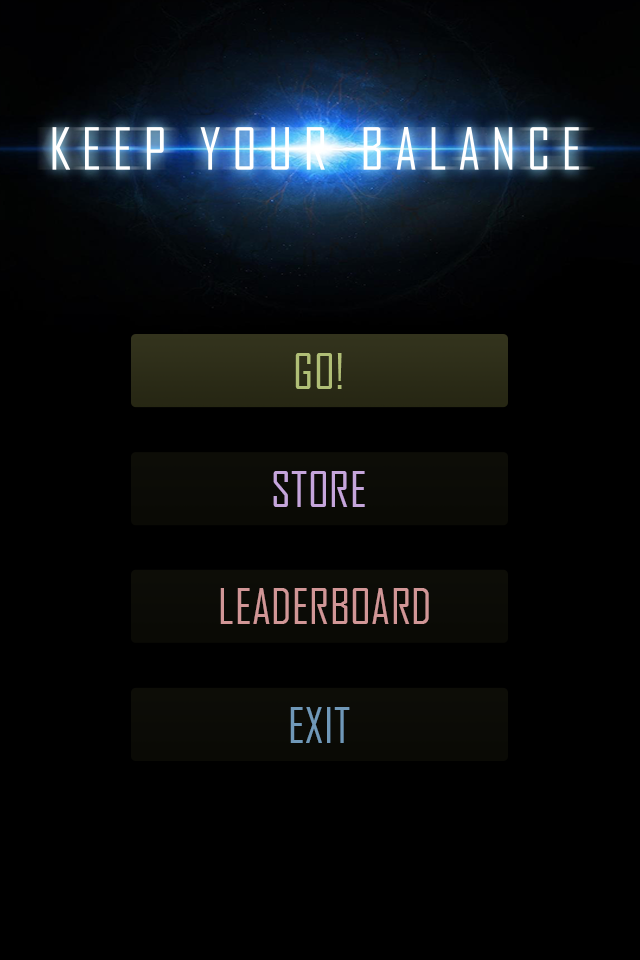
<style>
.page{position:relative;width:640px;height:960px;background:#000000}
.page>*{position:absolute;margin:0}
.t1{font:46.9px "AgencyFB-Reg";letter-spacing:0.01em;color:#b0be76}
.t2{font:46.9px "AgencyFB-Reg";letter-spacing:0.01em;color:#c5a5db}
.t3{font:46.9px "AgencyFB-Reg";letter-spacing:0.01em;color:#d19696}
.t4{font:46.9px "AgencyFB-Reg";letter-spacing:0.01em;color:#7098b8}
</style>
<div class="page">
<p class="t1" style="left:295px;top:353px;width:47px;height:36px">GO!</p>
<p class="t2" style="left:273px;top:471px;width:92px;height:36px">STORE</p>
<p class="t3" style="left:220px;top:588px;width:209px;height:36px">LEADERBOARD</p>
<p class="t4" style="left:290px;top:707px;width:60px;height:36px">EXIT</p>
</div>
